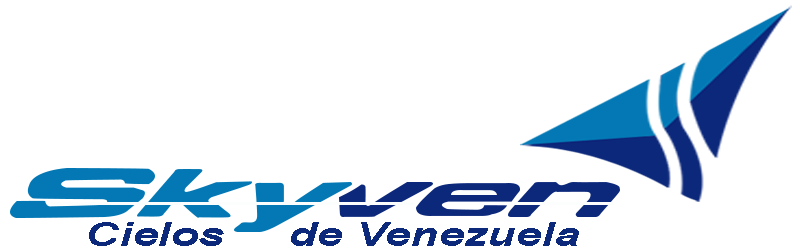
<style>
.page{position:relative;width:800px;height:250px;background:#ffffff}
.page>*{position:absolute;margin:0}
.t1{font:32.9px "Arial-BoldItalicMT";color:#0c287b;scale:1.4 1}
</style>
<div class="page">
<p class="t1" style="left:89px;top:222px;width:490px;height:24px">Cielos     de Venezuela</p>
</div>
